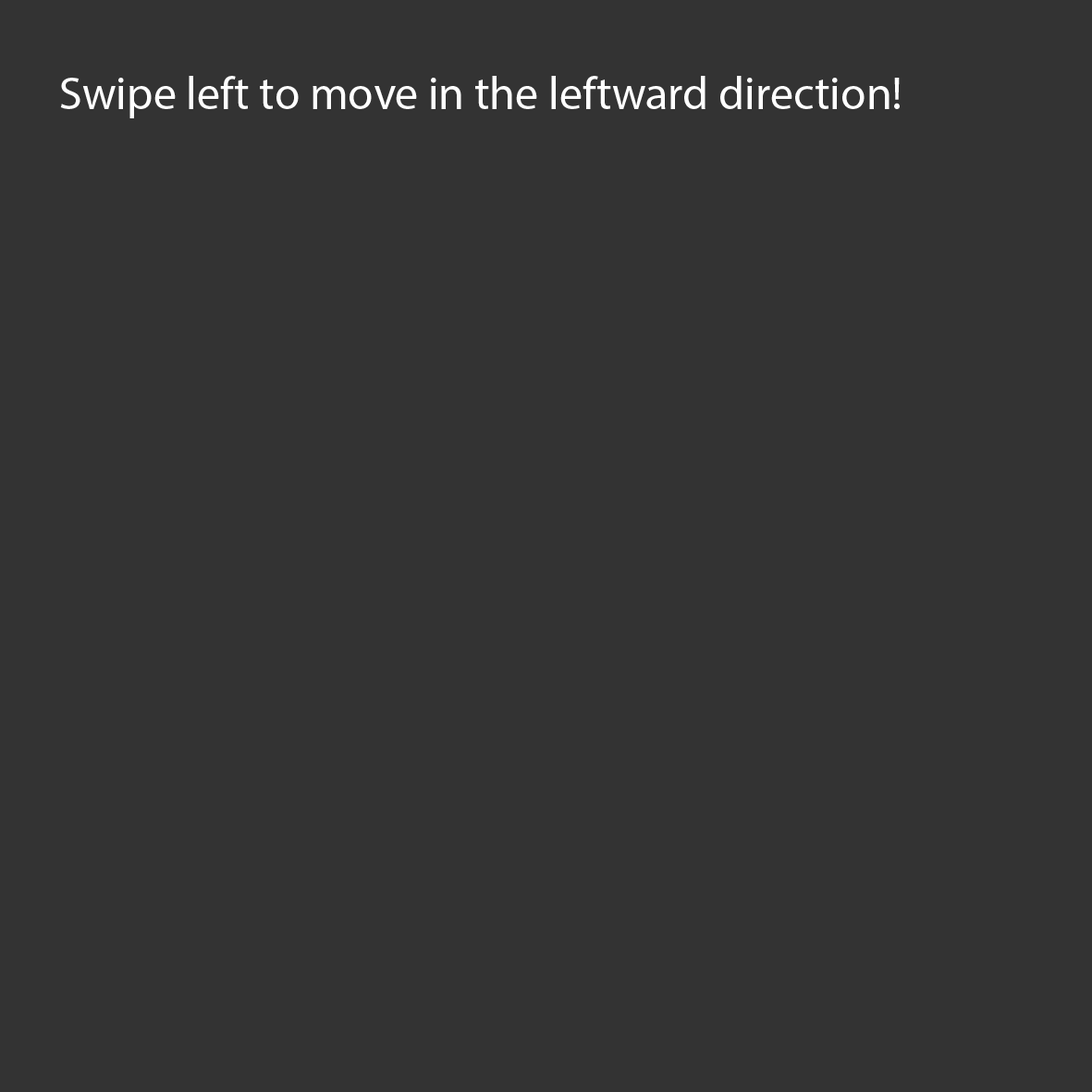
<style>
.page{position:relative;width:1092px;height:1092px;background:#333333}
.page>*{position:absolute;margin:0}
.t1{font:11.1px "MyriadPro-Regular";color:#ffffff}
</style>
<div class="page">
<p class="t1" style="left:60px;top:76px;width:840px;height:42px">Swipe left to move in the leftward direction!</p>
</div>
